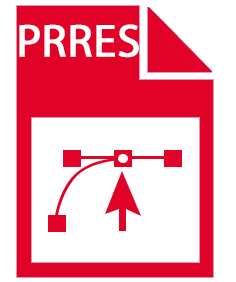
<style>
.page{position:relative;width:236px;height:282px;background:#ffffff}
.page>*{position:absolute;margin:0}
.t1{font:45.8px "MyriadPro-Regular";color:#ffffff;font-weight:bold}
</style>
<div class="page">
<p class="t1" style="left:19px;top:24px;width:120px;height:34px">PRRES</p>
</div>
